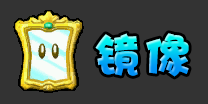
<style>
.page{position:relative;width:208px;height:104px;background:#333333}
.page>*{position:absolute;margin:0}
.t1{font:45.8px "DFPHaiBaoW12";letter-spacing:0.1em}
</style>
<div class="page">
<p class="t1" style="left:95px;top:33px;width:94px;height:44px">镜像</p>
</div>
